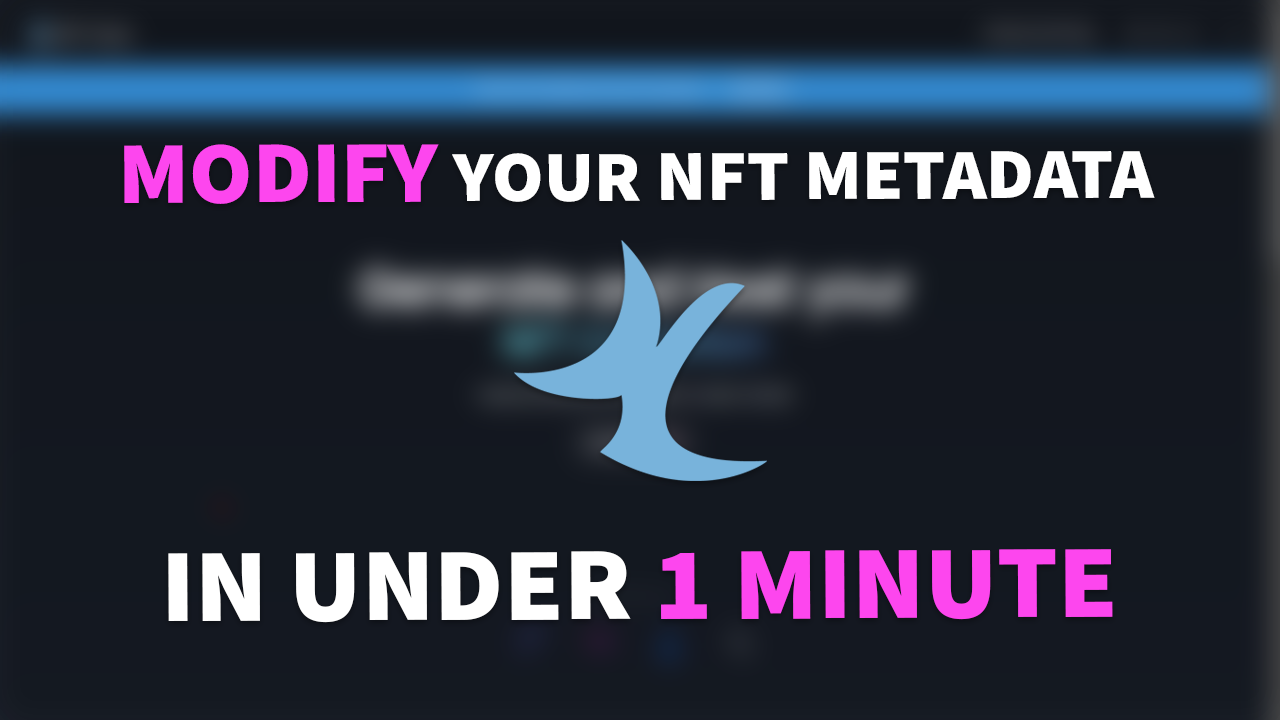
<style>
.page{position:relative;width:1280px;height:720px}
.page>*{position:absolute;margin:0}
.t1{font:71.8px "SourceSansRoman-Black";color:#ffffff;scale:1.04 1}
.t2{font:88.1px "SourceSansRoman-Black";color:#fd46ee;scale:1.04 1}
.t3{font:103.8px "SourceSansRoman-Black";color:#ffffff;scale:1.04 1}
.t4{font:103.8px "SourceSansRoman-Black";color:#fd46ee;scale:1.04 1}
</style>
<div class="page">
<p class="t1" style="left:124px;top:144px;width:1031px;height:60px"><span class="t2">MODIFY </span>YOUR NFT METADATA</p>
<p class="t3" style="left:168px;top:549px;width:945px;height:74px">IN UNDER <span class="t4">1 MINUTE</span></p>
</div>
